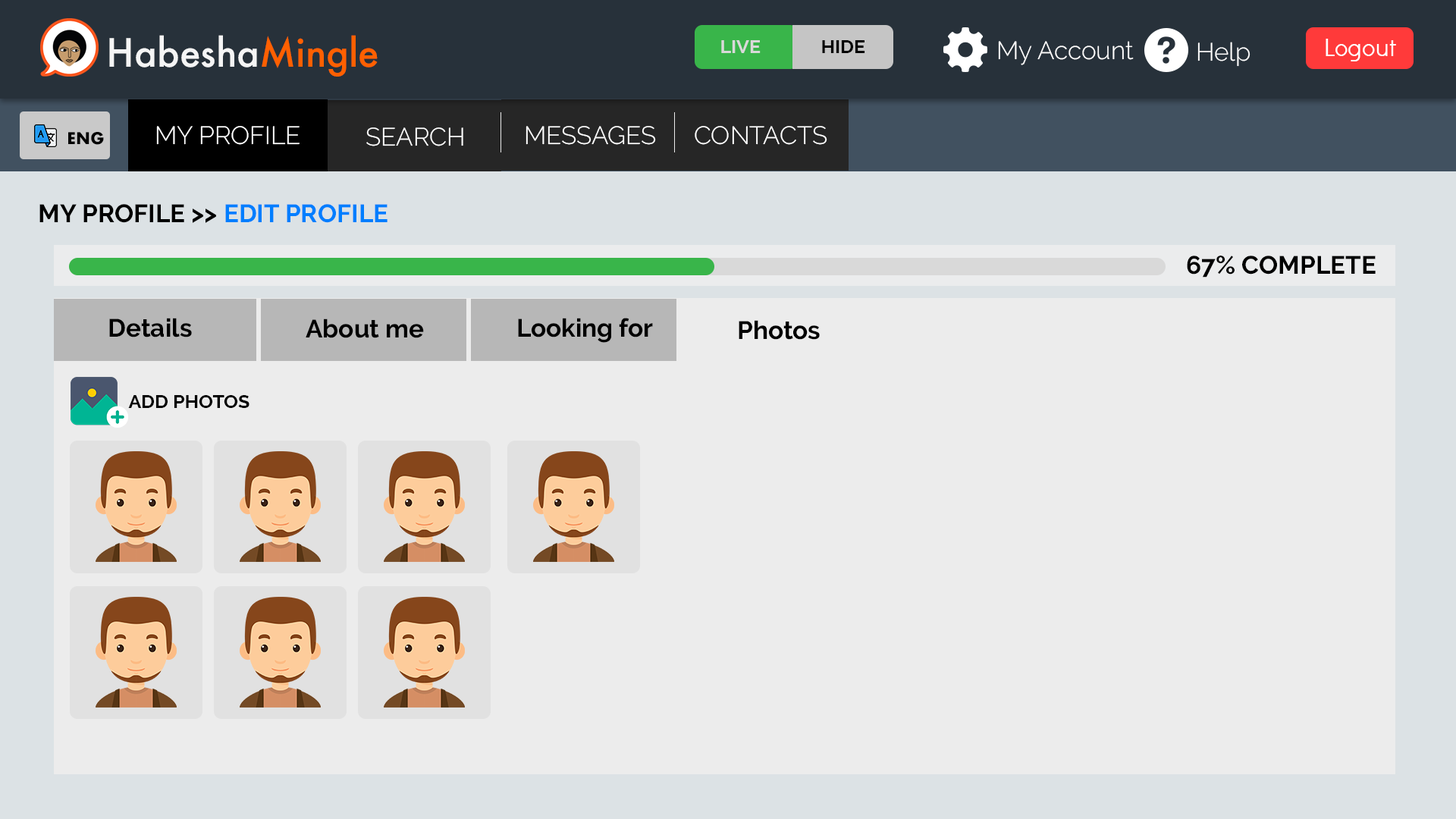
<style>
.page{position:relative;width:1456px;height:819px;background:#ececec}
.page>*{position:absolute;margin:0}
.t1{font:37.9px "Futura-Medium";color:#f5f5f5}
.t2{font:37.9px "Futura-Medium";color:#ff6000}
.t3{font:19px "Raleway-Bold";color:#d9d9d9}
.t4{font:19px "Raleway-Bold";color:#000000}
.t5{font:25.3px "Raleway-Light";color:#ffffff}
.t6{font:25.3px "DidactGothic";color:#ffffff}
.t7{font:25.3px "Raleway-Bold";color:#000000}
.t8{font:25.3px "Raleway-Bold";color:#007eff}
</style>
<div class="page">
<p class="t1" style="left:109px;top:35px;width:269px;height:42px">Habesha<span class="t2">Mingle</span></p>
<p class="t3" style="left:721px;top:40px;width:40px;height:13px">LIVE</p>
<p class="t4" style="left:822px;top:40px;width:43px;height:13px">HIDE</p>
<p class="t5" style="left:998px;top:41px;width:136px;height:24px">My Account</p>
<p class="t5" style="left:1197px;top:42px;width:53px;height:25px">Help</p>
<p class="t6" style="left:1326px;top:39px;width:70px;height:22px">Logout</p>
<p class="t5" style="left:156px;top:126px;width:144px;height:19px">MY PROFILE</p>
<p class="t5" style="left:526px;top:126px;width:130px;height:19px">MESSAGES</p>
<p class="t5" style="left:695px;top:126px;width:132px;height:19px">CONTACTS</p>
<p class="t5" style="left:366px;top:127px;width:97px;height:19px">SEARCH</p>
<p class="t7" style="left:39px;top:204px;width:349px;height:19px">MY PROFILE &gt;&gt; <span class="t8">EDIT PROFILE</span></p>
<p class="t7" style="left:1187px;top:256px;width:189px;height:22px">67% COMPLETE</p>
<p class="t7" style="left:109px;top:318px;width:83px;height:19px">Details</p>
<p class="t7" style="left:518px;top:318px;width:135px;height:25px">Looking for</p>
<p class="t7" style="left:306px;top:318px;width:118px;height:20px">About me</p>
<p class="t7" style="left:739px;top:320px;width:81px;height:20px">Photos</p>
<p class="t4" style="left:128px;top:395px;width:121px;height:13px">ADD PHOTOS</p>
</div>
